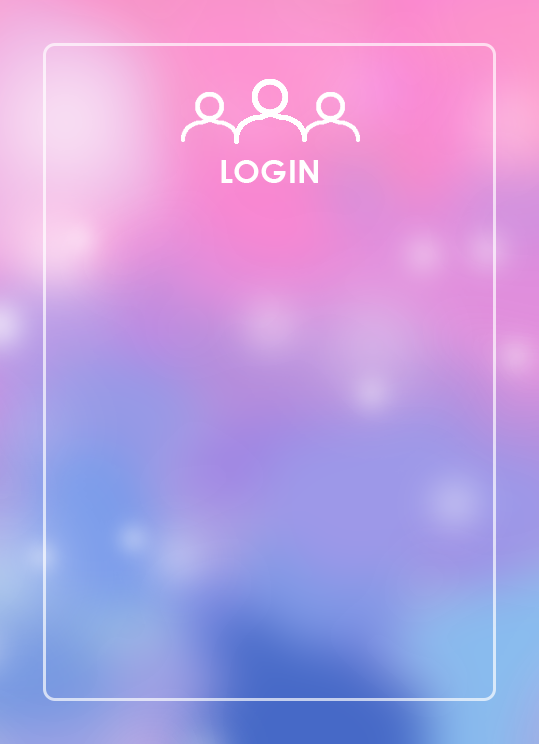
<style>
.page{position:relative;width:539px;height:744px}
.page>*{position:absolute;margin:0}
.t1{font:32.3px "CenturyGothic-Bold";color:#ffffff}
</style>
<div class="page">
<p class="t1" style="left:221px;top:160px;width:97px;height:23px">LOGIN</p>
</div>
